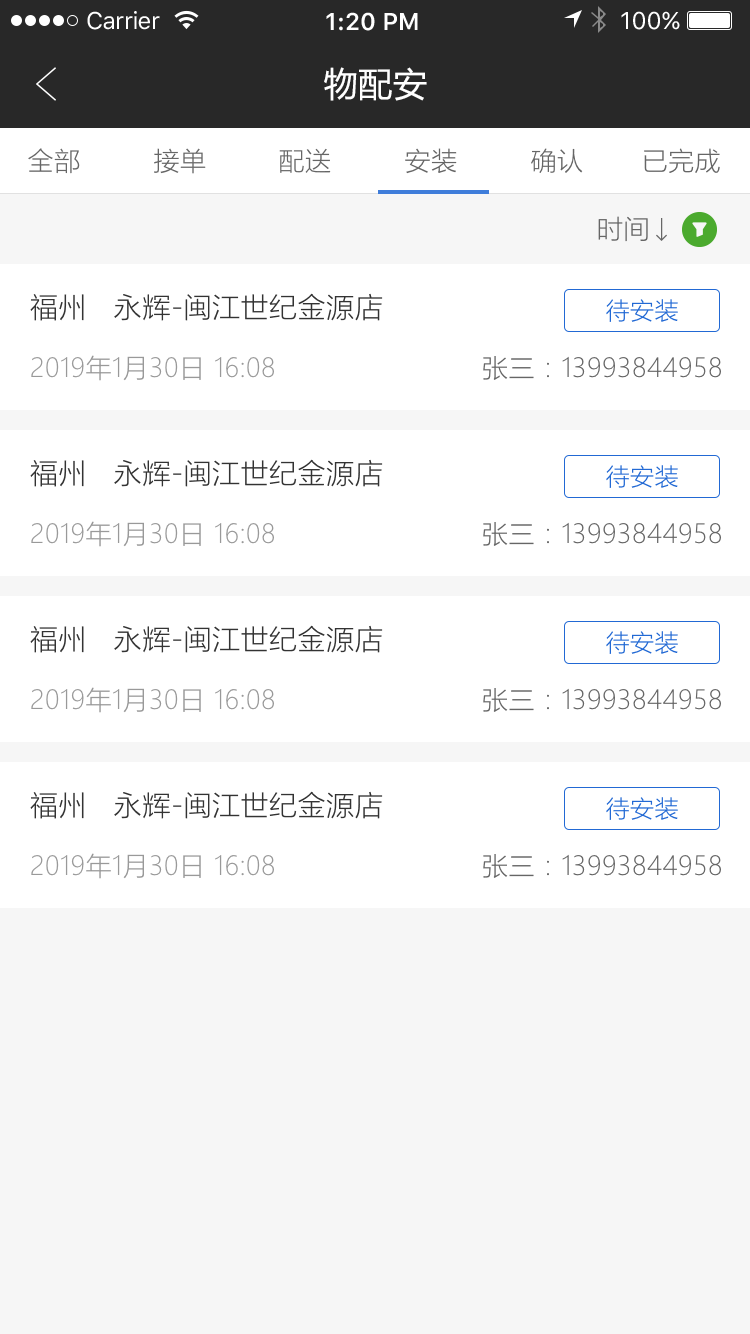
<style>
.page{position:relative;width:750px;height:1334px;background:#ffffff}
.page>*{position:absolute;margin:0}
.t1{font:24px "SFUIText-Regular";letter-spacing:-0.025em;color:#ffffff}
.t2{font:24px "SFUIText-Semibold";color:#ffffff}
.t3{font:24px "SFUIText-Regular";color:#ffffff}
.t4{font:34px "MicrosoftYaHei";letter-spacing:0.02em;color:#ffffff}
.t5{font:26px "MicrosoftYaHeiLight";letter-spacing:0.02em;color:#666666}
.t6{font:28px "MicrosoftYaHeiLight";letter-spacing:0.02em;color:#333333}
.t7{font:24px "MicrosoftYaHeiLight";letter-spacing:0.02em;color:#2269d4}
.t8{font:26px "MicrosoftYaHeiLight";letter-spacing:0.02em;color:#999999}
</style>
<div class="page">
<p class="t1" style="left:87px;top:11px;width:73px;height:19px">Carrier</p>
<p class="t2" style="left:326px;top:12px;width:92px;height:19px">1:20 PM</p>
<p class="t3" style="left:621px;top:11px;width:59px;height:19px">100%</p>
<p class="t4" style="left:324px;top:67px;width:103px;height:34px">物配安</p>
<p class="t5" style="left:28px;top:148px;width:52px;height:26px">全部</p>
<p class="t5" style="left:154px;top:148px;width:52px;height:26px">接单</p>
<p class="t5" style="left:279px;top:148px;width:52px;height:25px">配送</p>
<p class="t5" style="left:405px;top:148px;width:52px;height:26px">安装</p>
<p class="t5" style="left:531px;top:148px;width:52px;height:25px">确认</p>
<p class="t5" style="left:644px;top:148px;width:76px;height:25px">已完成</p>
<p class="t5" style="left:598px;top:216px;width:50px;height:26px">时间</p>
<p class="t6" style="left:30px;top:293px;width:353px;height:28px">福州   永辉-闽江世纪金源店</p>
<p class="t7" style="left:606px;top:299px;width:72px;height:23px">待安装</p>
<p class="t8" style="left:31px;top:355px;width:243px;height:26px">2019年1月30日 16:08</p>
<p class="t5" style="left:483px;top:356px;width:238px;height:24px">张三：13993844958</p>
<p class="t6" style="left:30px;top:459px;width:353px;height:28px">福州   永辉-闽江世纪金源店</p>
<p class="t7" style="left:606px;top:465px;width:72px;height:23px">待安装</p>
<p class="t8" style="left:31px;top:521px;width:243px;height:26px">2019年1月30日 16:08</p>
<p class="t5" style="left:483px;top:522px;width:238px;height:24px">张三：13993844958</p>
<p class="t6" style="left:30px;top:625px;width:353px;height:28px">福州   永辉-闽江世纪金源店</p>
<p class="t7" style="left:606px;top:631px;width:72px;height:23px">待安装</p>
<p class="t8" style="left:31px;top:687px;width:243px;height:26px">2019年1月30日 16:08</p>
<p class="t5" style="left:483px;top:688px;width:238px;height:24px">张三：13993844958</p>
<p class="t6" style="left:30px;top:791px;width:353px;height:28px">福州   永辉-闽江世纪金源店</p>
<p class="t7" style="left:606px;top:797px;width:72px;height:23px">待安装</p>
<p class="t8" style="left:31px;top:853px;width:243px;height:26px">2019年1月30日 16:08</p>
<p class="t5" style="left:483px;top:854px;width:238px;height:24px">张三：13993844958</p>
</div>
